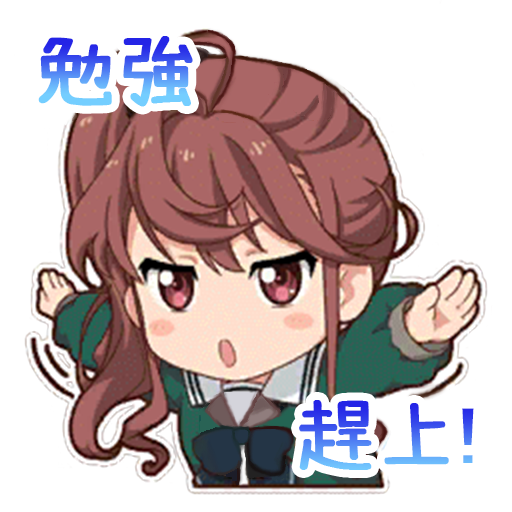
<style>
.page{position:relative;width:512px;height:512px;background:#ffffff}
.page>*{position:absolute;margin:0}
.t1{font:80px "SetoFont";font-weight:bold}
.t2{font:80px "MS-PGothic";font-weight:bold}
</style>
<div class="page">
<p class="t1" style="left:38px;top:36px;width:155px;height:71px">勉強</p>
<p class="t1" style="left:299px;top:400px;width:175px;height:70px">趕上<span class="t2">!</span></p>
</div>
